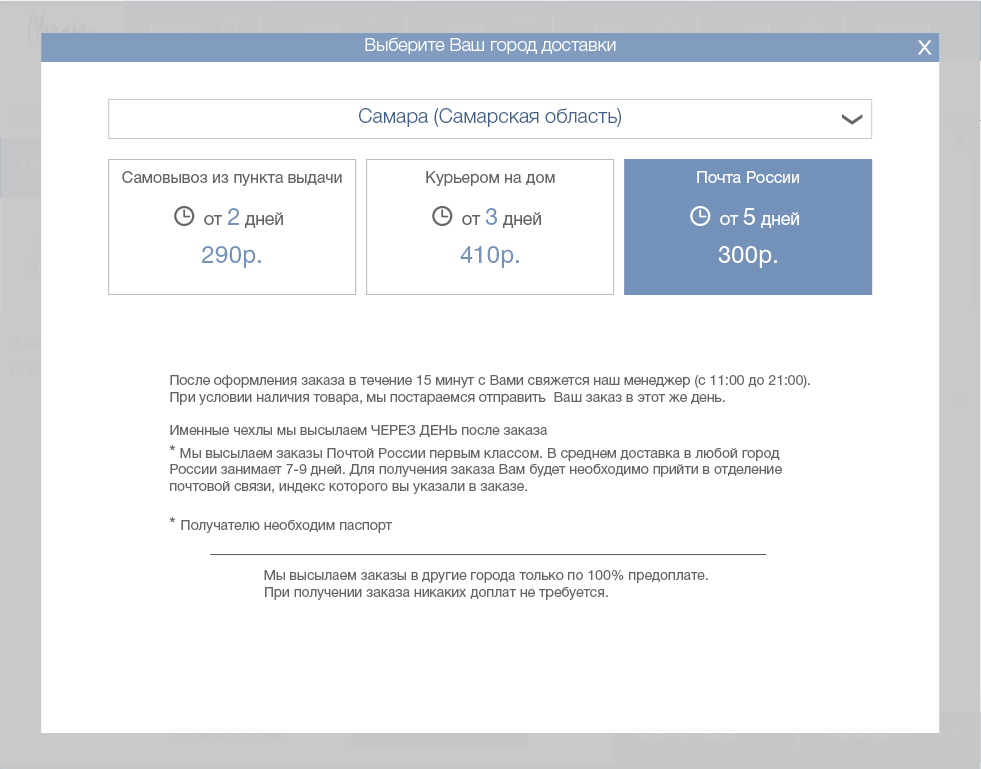
<style>
.page{position:relative;width:981px;height:769px;background:#ffffff}
.page>*{position:absolute;margin:0}
.t1{font:12px "HelveticaNeueCyr-Roman";color:#cacaca}
.t2{font:18px "HelveticaNeueCyr-Light";color:#ffffff}
.t3{font:20px "HelveticaNeueCyr-Light";color:#405e88}
.t4{font:16px "HelveticaNeueCyr-Roman";color:#656565}
.t5{font:16px "HelveticaNeueCyr-Roman";color:#ffffff}
.t6{font:17.7px "HelveticaNeueCyr-Roman";color:#656565}
.t7{font:23.6px "HelveticaNeueCyr-Roman";color:#7491b9}
.t8{font:17.7px "HelveticaNeueCyr-Roman";color:#ffffff}
.t9{font:23.6px "HelveticaNeueCyr-Roman";color:#ffffff}
.t10{font:24px "HelveticaNeueCyr-Roman";color:#7491b9}
.t11{font:24px "HelveticaNeueCyr-Roman";color:#ffffff}
.t12{font:14px "HelveticaNeueCyr-Roman";color:#656565}
.t13{font:18px "HelveticaNeueCyr-Roman";color:#656565}
</style>
<div class="page">
<p class="t1" style="left:148px;top:22px;width:50px;height:13px">ДЕВАЙС</p>
<p class="t1" style="left:300px;top:24px;width:39px;height:10px">ЧЕХОЛ</p>
<p class="t1" style="left:446px;top:24px;width:39px;height:9px">ТЕКСТ</p>
<p class="t1" style="left:596px;top:24px;width:32px;height:11px">ЦВЕТ</p>
<p class="t1" style="left:743px;top:24px;width:27px;height:9px">ФОН</p>
<p class="t1" style="left:876px;top:22px;width:54px;height:12px">СМАЙЛЫ</p>
<p class="t2" style="left:365px;top:37px;width:251px;height:17px">Выберите Ваш город доставки</p>
<p class="t3" style="left:359px;top:108px;width:262px;height:19px">Самара (Самарская область)</p>
<p class="t4" style="left:122px;top:171px;width:220px;height:15px">Самовывоз из пункта выдачи</p>
<p class="t4" style="left:426px;top:171px;width:129px;height:15px">Курьером на дом</p>
<p class="t5" style="left:697px;top:171px;width:102px;height:12px">Почта России</p>
<p class="t6" style="left:204px;top:208px;width:79px;height:20px">от <span class="t7">2</span> дней</p>
<p class="t6" style="left:462px;top:208px;width:79px;height:20px">от <span class="t7">3</span> дней</p>
<p class="t8" style="left:720px;top:208px;width:79px;height:20px">от <span class="t9">5</span> дней</p>
<p class="t10" style="left:202px;top:246px;width:59px;height:22px">290р.</p>
<p class="t10" style="left:460px;top:246px;width:59px;height:22px">410р.</p>
<p class="t11" style="left:718px;top:246px;width:59px;height:22px">300р.</p>
<p class="t12" style="left:170px;top:375px;width:640px;height:62px">После оформления заказа в течение 15 минут с Вами свяжется наш менеджер (с 11:00 до 21:00).<br>При условии наличия товара, мы постараемся отправить  Ваш заказ в этот же день.<br><br>Именные чехлы мы высылаем ЧЕРЕЗ ДЕНЬ после заказа</p>
<p class="t12" style="left:169px;top:445px;width:613px;height:88px"><span class="t13">*</span> Мы высылаем заказы Почтой России первым классом. В среднем доставка в любой город <br>России занимает 7-9 дней. Для получения заказа Вам будет необходимо прийти в отделение<br>почтовой связи, индекс которого вы указали в заказе.<br><br><span class="t13">* </span>Получателю необходим паспорт</p>
<p class="t12" style="left:264px;top:569px;width:444px;height:31px">Мы высылаем заказы в другие города только по 100% предоплате. <br>При получении заказа никаких доплат не требуется.</p>
</div>
